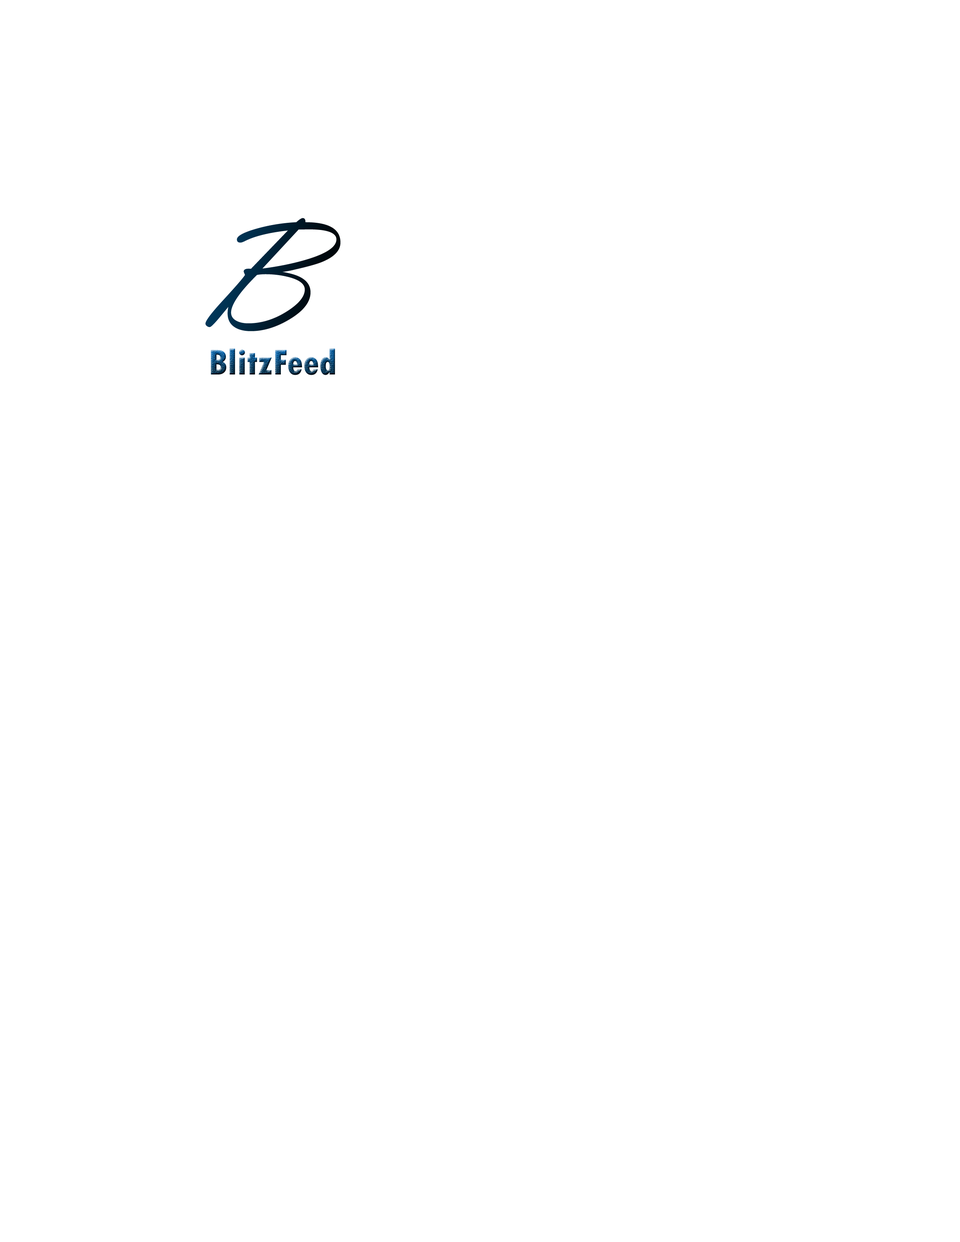
<style>
.page{position:relative;width:960px;height:1242px;background:#ffffff}
.page>*{position:absolute;margin:0}
.t1{font:156.8px "VladimirScript"}
.t2{font:37.6px "TwCenMT-CondensedExtraBold"}
</style>
<div class="page">
<p class="t1" style="left:205px;top:218px;width:136px;height:113px">B</p>
<p class="t2" style="left:211px;top:349px;width:124px;height:26px">BlitzFeed</p>
</div>
